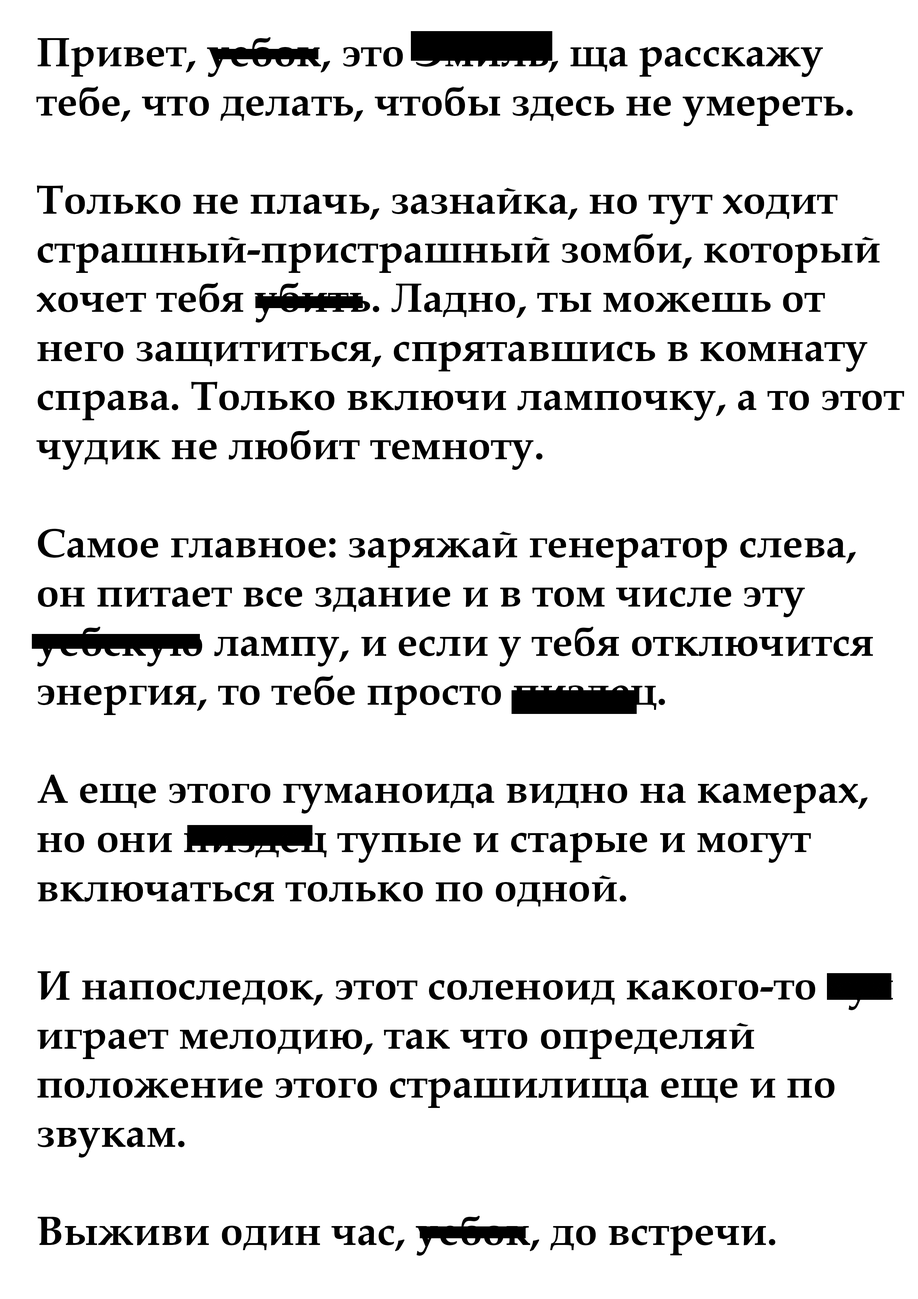
<style>
.page{position:relative;width:918px;height:1299px;background:#ffffff}
.page>*{position:absolute;margin:0}
.t1{font:40.9px "BookAntiqua-Bold";color:#000000}
</style>
<div class="page">
<p class="t1" style="left:36px;top:37px;width:868px;height:1218px">Привет, уебок, это Эмиль, ща расскажу<br>тебе, что делать, чтобы здесь не умереть.<br><br>Только не плачь, зазнайка, но тут ходит<br>страшный-пристрашный зомби, который<br>хочет тебя убить. Ладно, ты можешь от<br>него защититься, спрятавшись в комнату<br>справа. Только включи лампочку, а то этот<br>чудик не любит темноту.<br><br>Самое главное: заряжай генератор слева,<br>он питает все здание и в том числе эту<br>уебскую лампу, и если у тебя отключится<br>энергия, то тебе просто пиздец.<br><br>А еще этого гуманоида видно на камерах,<br>но они пиздец тупые и старые и могут<br>включаться только по одной.<br><br>И напоследок, этот соленоид какого-то хуя<br>играет мелодию, так что определяй<br>положение этого страшилища еще и по<br>звукам.<br><br>Выживи один час, уебок, до встречи.</p>
</div>
